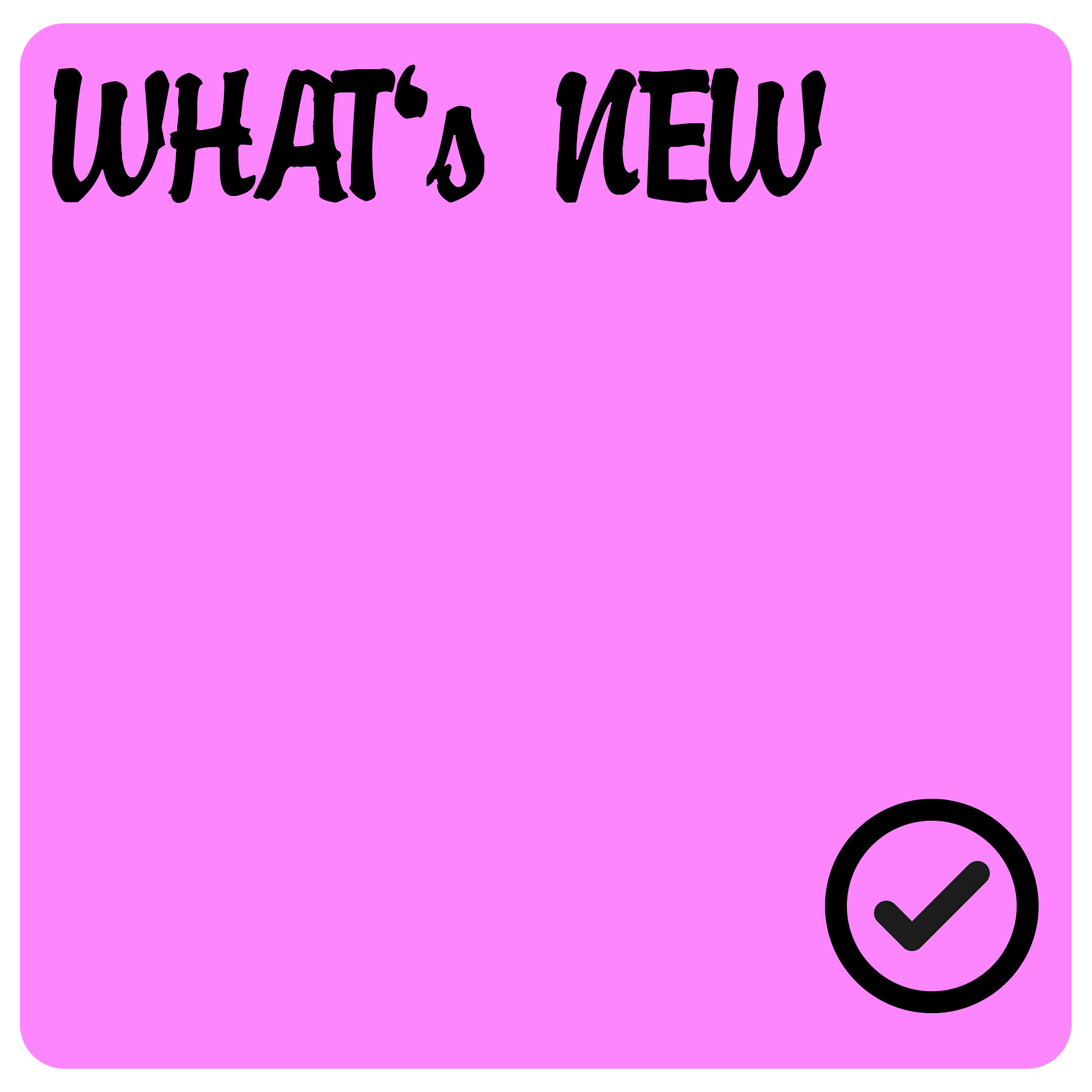
<style>
.page{position:relative;width:1092px;height:1092px;background:#fd86ff}
.page>*{position:absolute;margin:0}
.t1{font:187.6px "Fixthephoto---Buke";letter-spacing:-0.01em;color:#000000}
</style>
<div class="page">
<p class="t1" style="left:52px;top:64px;width:775px;height:139px">WHAT's NEW</p>
</div>
